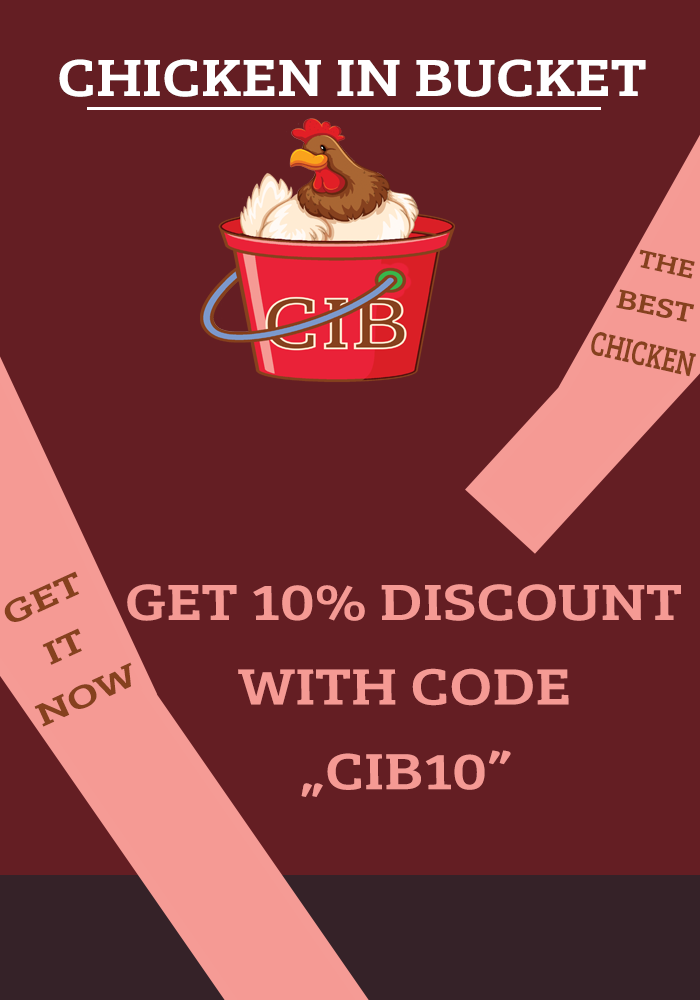
<style>
.page{position:relative;width:700px;height:1000px;background:#641e23}
.page>*{position:absolute;margin:0}
.t1{font:54px "BreeSerif-Regular";color:#ffffff;scale:1.2 1}
.t2{font:25.9px "BreeSerif-Regular";color:#86411e;scale:1.23 1}
.t3{font:27.9px "BreeSerif-Regular";color:#86411e;scale:1.25 1}
.t4{font:34.9px "BreeSerif-Regular";color:#86411e;scale:0.74 1}
.t5{font:33.1px "BreeSerif-Regular";color:#86411e;scale:1.46 1}
.t6{font:52.8px "BreeSerif-Regular";color:#f59a94;scale:1.23 1}
</style>
<div class="page">
<p class="t1" style="left:59px;top:59px;width:587px;height:38px">CHICKEN IN BUCKET</p>
<p class="t2" style="left:639px;top:249px;width:56px;height:30px;rotate:13deg">THE</p>
<p class="t3" style="left:616px;top:289px;width:79px;height:33px;rotate:12deg">BEST</p>
<p class="t4" style="left:591px;top:332px;width:105px;height:45px;rotate:13deg">CHICKEN</p>
<p class="t5" style="left:4px;top:571px;width:128px;height:156px;text-align:center;rotate:-25deg">GET<br>IT<br>NOW</p>
<p class="t6" style="left:127px;top:584px;width:554px;height:213px;text-align:center">GET 10% DISCOUNT<br>WITH CODE<br>„CIB10”</p>
</div>
